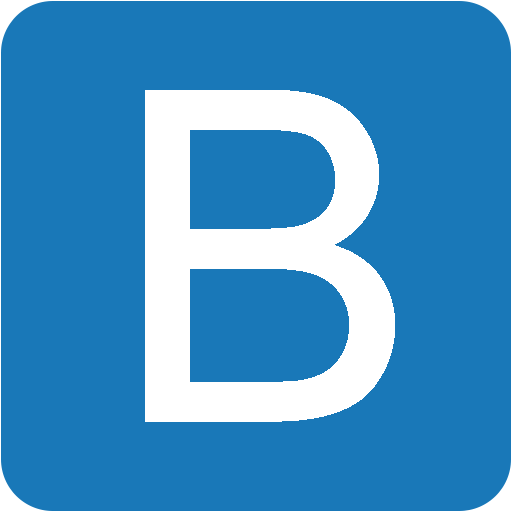
<style>
.page{position:relative;width:512px;height:512px;background:#1978b8}
.page>*{position:absolute;margin:0}
.t1{font:462.2px "ArialMT";color:#ffffff}
</style>
<div class="page">
<p class="t1" style="left:145px;top:90px;width:250px;height:332px">B</p>
</div>
